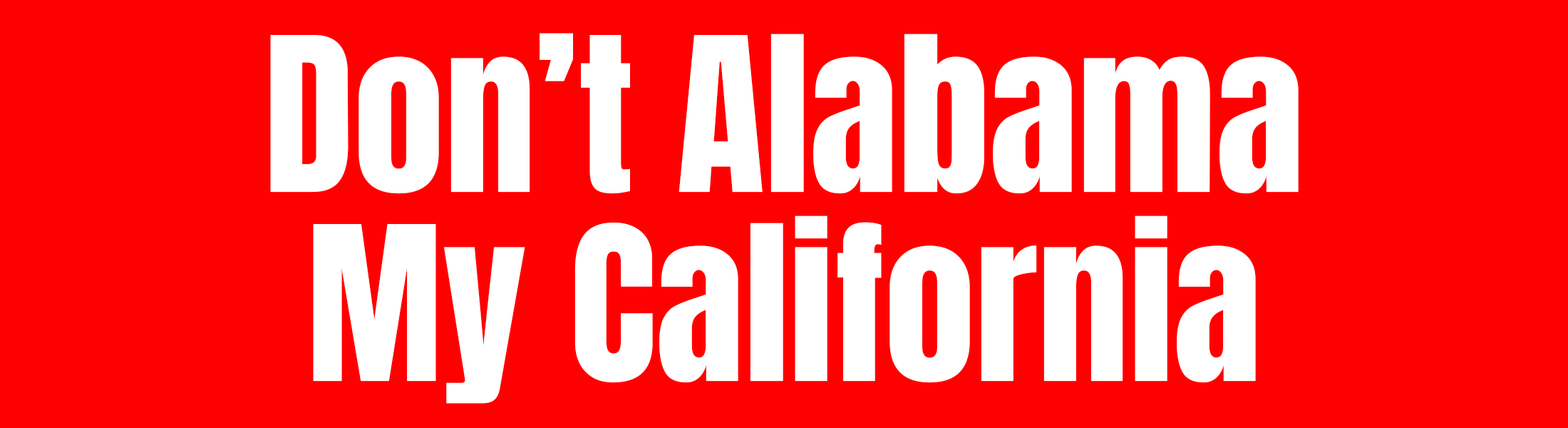
<style>
.page{position:relative;width:1568px;height:428px;background:#ff0000}
.page>*{position:absolute;margin:0}
.t1{font:182.5px "Anton-Regular";color:#ffffff}
</style>
<div class="page">
<p class="t1" style="left:270px;top:33px;width:1029px;height:161px">Don’t Alabama</p>
<p class="t1" style="left:313px;top:215px;width:943px;height:188px">My California</p>
</div>
